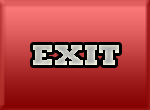
<style>
.page{position:relative;width:150px;height:110px}
.page>*{position:absolute;margin:0}
.t1{font:30px "Rockwell-ExtraBold"}
</style>
<div class="page">
<p class="t1" style="left:33px;top:45px;width:86px;height:20px">EXIT</p>
</div>
